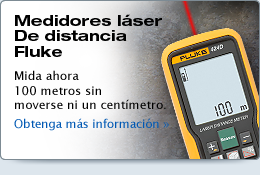
<style>
.page{position:relative;width:260px;height:175px}
.page>*{position:absolute;margin:0}
.t1{font:15px/15.5px "HelveticaNeueLTStd-BdEx";color:#000000}
.t2{font:12px "LucidaSans";color:#000000}
.t3{font:12px/14.4px "LucidaSans";letter-spacing:-0.02em;color:#0058b3}
</style>
<div class="page">
<p class="t1" style="left:15px;top:14px;width:147px;height:43px">Medidores láser<br>De distancia<br>Fluke</p>
<p class="t2" style="left:14px;top:70px;width:155px;height:61px">Mida ahora<br>100 metros sin <br>moverse ni un centímetro.<br><span class="t3">Obtenga más información »</span></p>
</div>
